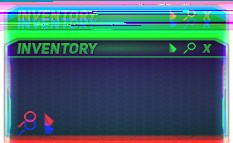
<style>
.page{position:relative;width:233px;height:143px}
.page>*{position:absolute;margin:0}
.t1{font:15px "UniSansHeavyItalicCAPS"}
.t2{font:12.5px "UniSansHeavyItalicCAPS"}
</style>
<div class="page">
<p class="t1" style="left:17px;top:9px;width:81px;height:11px">Inventory</p>
<p class="t2" style="left:202px;top:10px;width:10px;height:9px">X</p>
</div>
